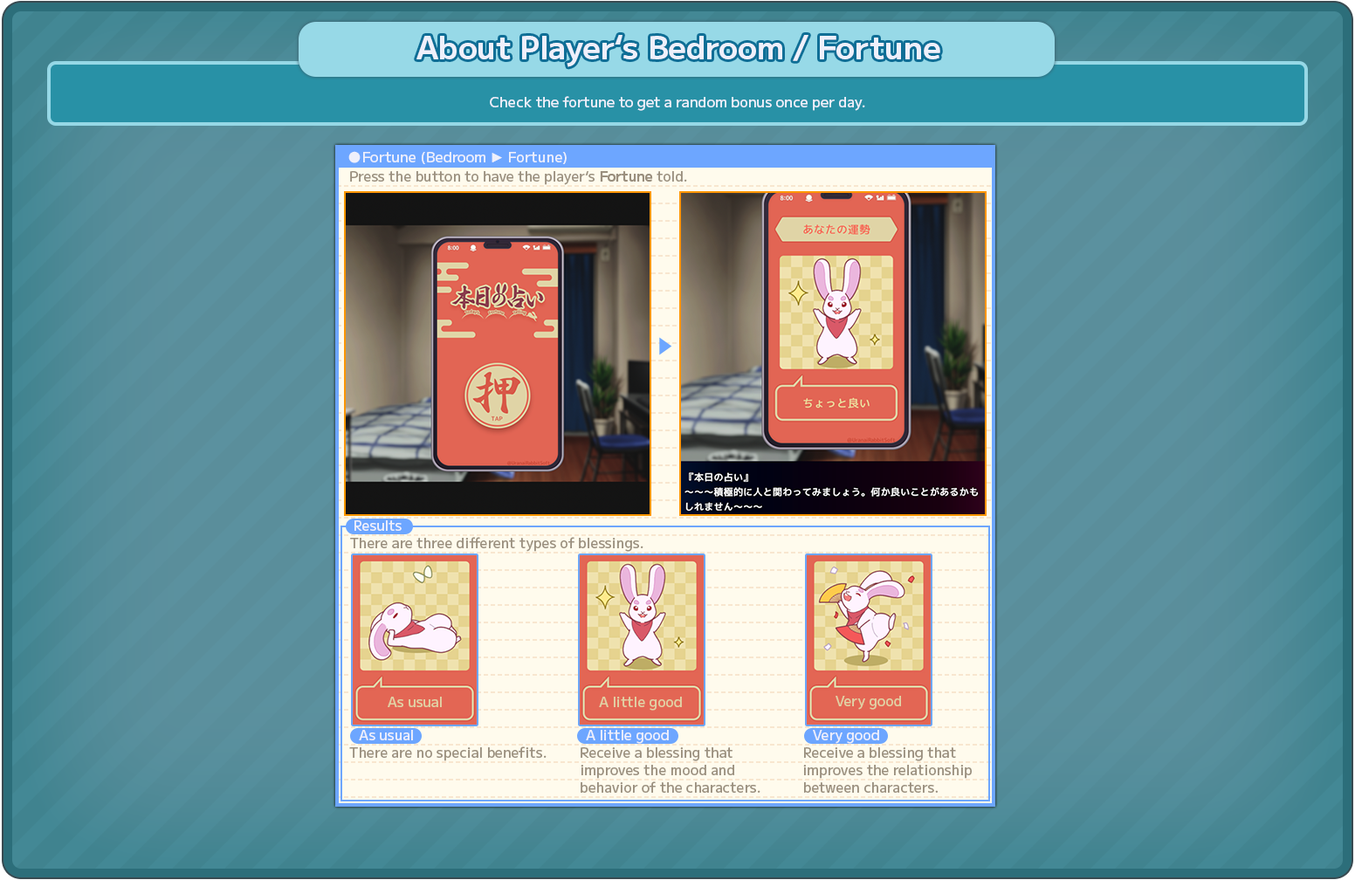
<style>
.page{position:relative;width:1355px;height:880px}
.page>*{position:absolute;margin:0}
.t1{font:31.4px "MPLUS2-SemiBold";color:#eff0fb}
.t2{font:14px "MPLUS2-Medium";color:#eff0fb}
.t3{font:14px "Arial-BoldMT";color:#eff0fb}
.t4{font:14px "MPLUS2-Medium";color:#9a8f7e}
.t5{font:14px "MPLUS2-SemiBold";color:#9a8f7e}
.t6{font:14px "MPLUS2-Medium";color:#e1d2a5}
.t7{font:14px/14px "MPLUS2-Medium";color:#9a8f7e}
</style>
<div class="page">
<p class="t1" style="left:416px;top:35px;width:524px;height:32px">About Player‘s Bedroom / Fortune</p>
<p class="t2" style="left:490px;top:96px;width:375px;height:15px">Check the fortune to get a random bonus once per day.</p>
<p class="t2" style="left:363px;top:152px;width:204px;height:12px">Fortune (Bedroom <span class="t3">►</span> Fortune)</p>
<p class="t4" style="left:350px;top:171px;width:337px;height:14px">Press the button to have the player‘s <span class="t5">Fortune </span>told.</p>
<p class="t2" style="left:354px;top:520px;width:48px;height:11px">Results</p>
<p class="t4" style="left:350px;top:537px;width:293px;height:15px">There are three different types of blessings.</p>
<p class="t6" style="left:388px;top:697px;width:54px;height:10px">As usual</p>
<p class="t6" style="left:599px;top:697px;width:83px;height:14px">A little good</p>
<p class="t6" style="left:836px;top:696px;width:65px;height:14px">Very good</p>
<p class="t2" style="left:359px;top:730px;width:54px;height:10px">As usual</p>
<p class="t2" style="left:586px;top:730px;width:83px;height:14px">A little good</p>
<p class="t2" style="left:813px;top:730px;width:66px;height:14px">Very good</p>
<p class="t4" style="left:349px;top:746px;width:198px;height:15px">There are no special benefits.</p>
<p class="t7" style="left:581px;top:747px;width:179px;height:46px">Receive a blessing that<br>improves the mood and<br>behavior of the characters.</p>
<p class="t7" style="left:803px;top:747px;width:169px;height:46px">Receive a blessing that<br>improves the relationship<br>between characters.</p>
</div>
